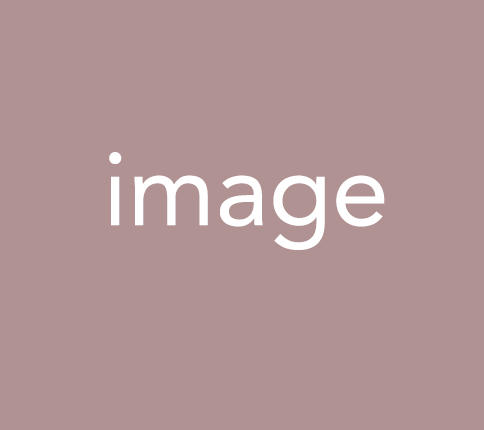
<style>
.page{position:relative;width:484px;height:430px;background:#b09292}
.page>*{position:absolute;margin:0}
.t1{font:103px "Avenir-Roman";color:#ffffff}
</style>
<div class="page">
<p class="t1" style="left:109px;top:152px;width:276px;height:98px">image</p>
</div>
